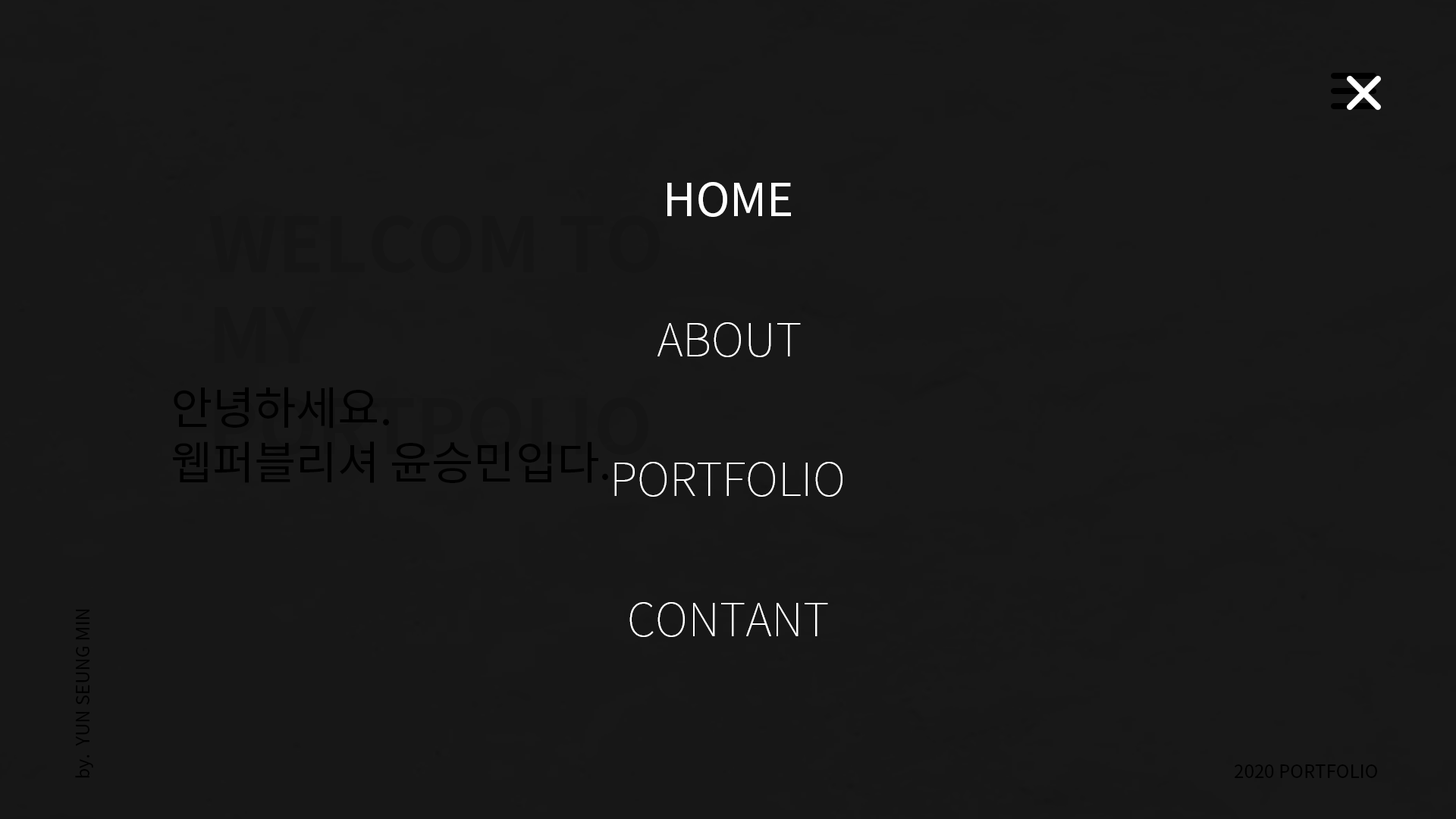
<style>
.page{position:relative;width:1456px;height:819px;background:#181818}
.page>*{position:absolute;margin:0}
.t1{font:45.5px "NotoSansKR-Regular";letter-spacing:-0.001em;color:#ffffff}
.t2{font:45.5px "NotoSansKR-Thin";letter-spacing:-0.001em;color:#ffffff}
.t3{font:45.5px "NotoSansKR-Regular";color:#000000}
.t4{font:18.2px "NotoSansKR-Regular";color:#000000}
</style>
<div class="page">
<p class="t1" style="left:667px;top:182px;width:124px;height:35px">HOME</p>
<p class="t2" style="left:657px;top:322px;width:144px;height:35px">ABOUT</p>
<p class="t3" style="left:172px;top:387px;width:436px;height:96px">안녕하세요.<br>웹퍼블리셔 윤승민입다.</p>
<p class="t2" style="left:614px;top:462px;width:228px;height:35px">PORTFOLIO</p>
<p class="t2" style="left:629px;top:602px;width:199px;height:35px">CONTANT</p>
<p class="t4" style="left:75px;top:609px;width:18px;height:169px;rotate:-90deg">by.  YUN SEUNG MIN</p>
<p class="t4" style="left:1235px;top:764px;width:142px;height:14px">2020 PORTFOLIO</p>
</div>
